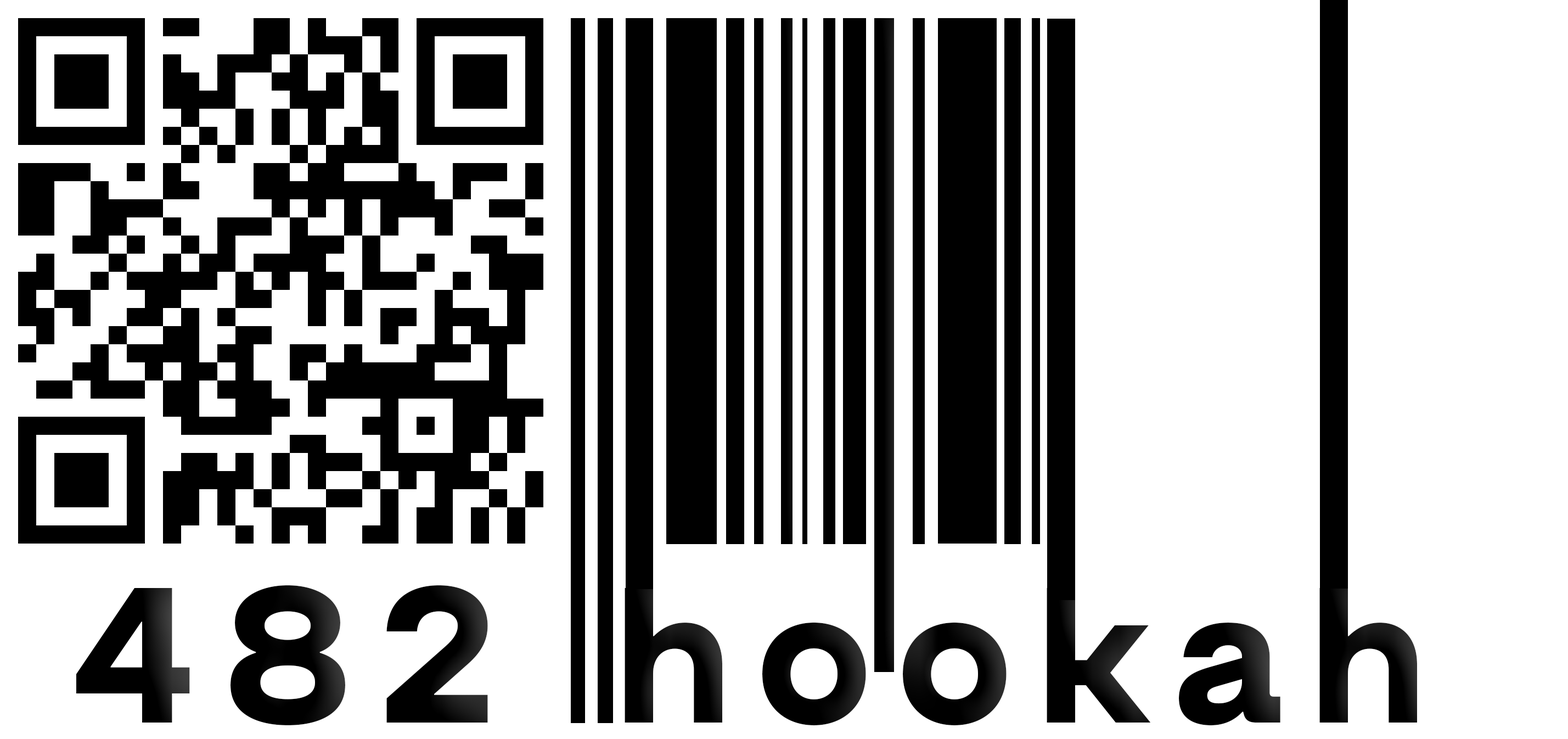
<style>
.page{position:relative;width:1568px;height:739px;background:#ffffff}
.page>*{position:absolute;margin:0}
.t1{font:192.1px "Steppe-ExtraBold";letter-spacing:0.12em;color:#000000}
</style>
<div class="page">
<p class="t1" style="left:76px;top:585px;width:412px;height:140px">482</p>
<p class="t1" style="left:625px;top:588px;width:792px;height:138px">hookah</p>
</div>
